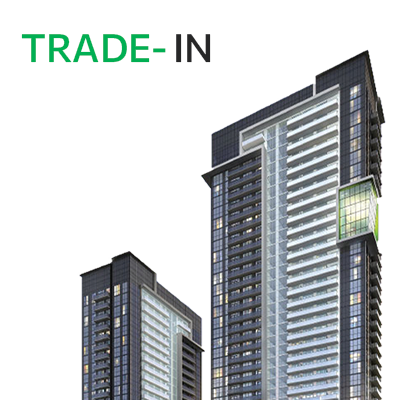
<style>
.page{position:relative;width:400px;height:400px;background:#ffffff}
.page>*{position:absolute;margin:0}
.t1{font:38.8px "Commissioner-Medium";color:#00af53}
.t2{font:38.8px "Commissioner-Medium";color:#272728}
</style>
<div class="page">
<p class="t1" style="left:21px;top:34px;width:145px;height:29px">TRADE-</p>
<p class="t2" style="left:176px;top:34px;width:35px;height:29px">IN</p>
</div>
